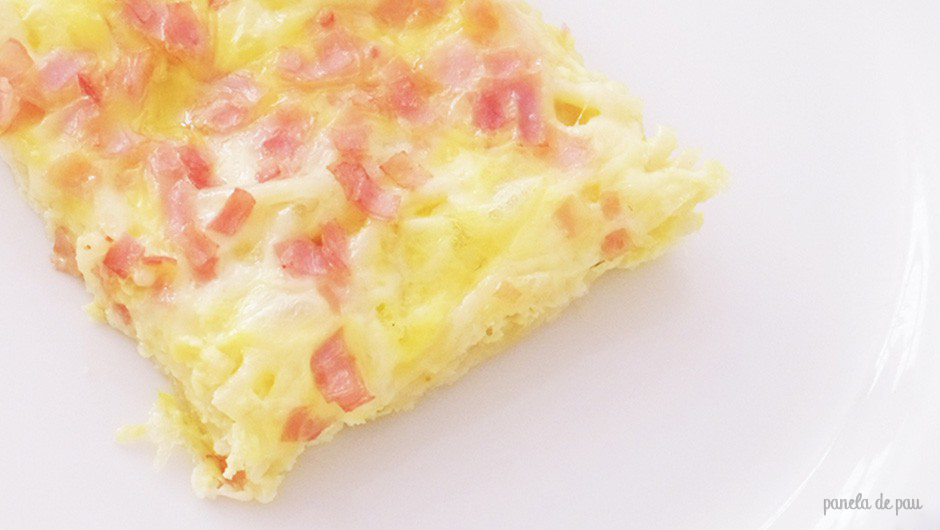
<style>
.page{position:relative;width:940px;height:530px}
.page>*{position:absolute;margin:0}
.t1{font:20px "Chalk-hand-lettering-shaded_demo";color:#b0afb1}
</style>
<div class="page">
<p class="t1" style="left:823px;top:492px;width:100px;height:24px">panela de pau</p>
</div>
